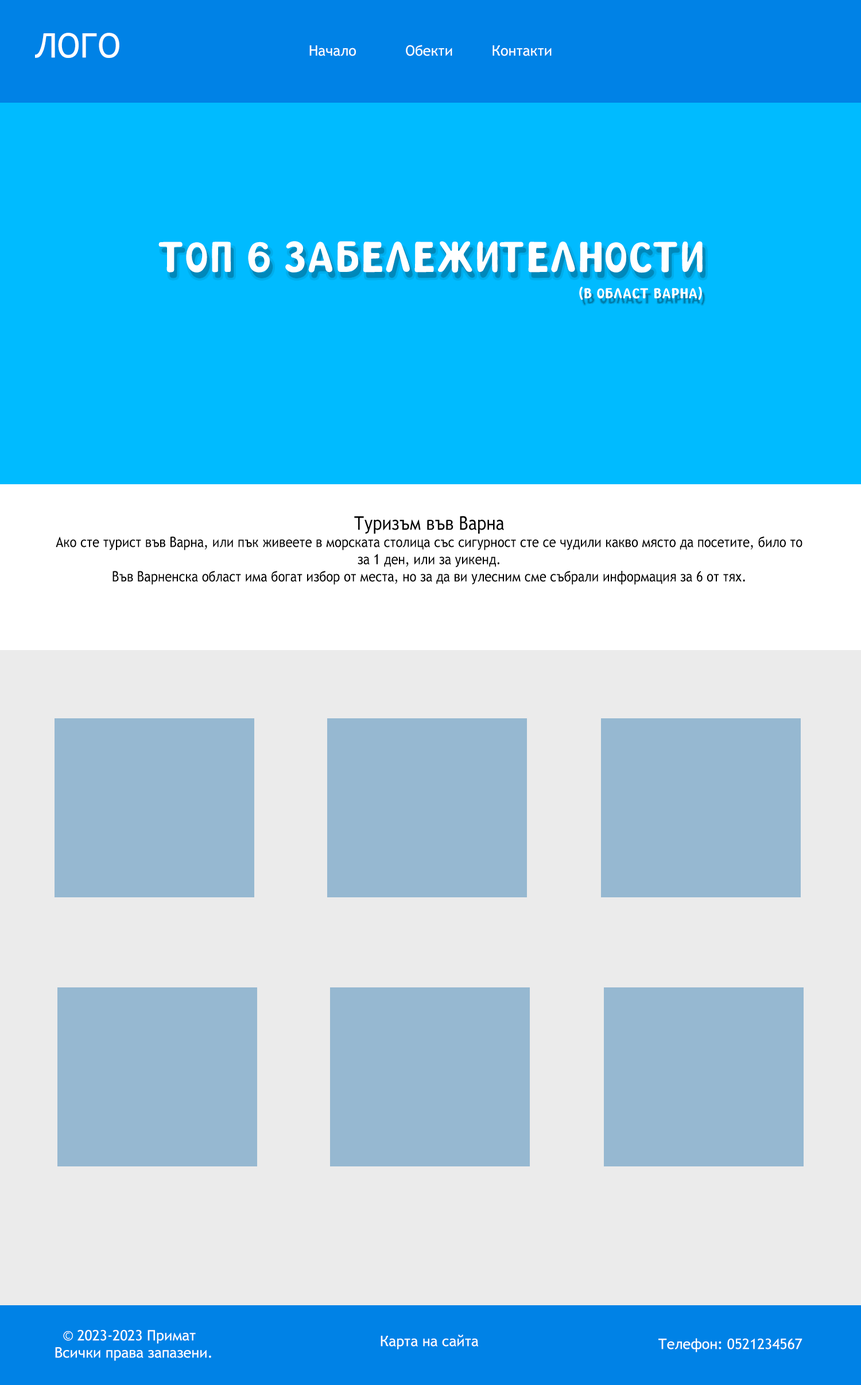
<style>
.page{position:relative;width:861px;height:1385px;background:#ebebeb}
.page>*{position:absolute;margin:0}
.t1{font:33.9px "TrebuchetMS";color:#ffffff}
.t2{font:14.3px "TrebuchetMS";color:#ffffff}
.t3{font:57.4px "gooseberrynormal";color:#ffffff}
.t4{font:19.1px "gooseberrynormal";color:#ffffff}
.t5{font:14.3px "TrebuchetMS";color:#000000;scale:0.88 1}
.t6{font:19.1px "TrebuchetMS";color:#000000;scale:0.88 1}
</style>
<div class="page">
<p class="t1" style="left:35px;top:33px;width:84px;height:25px">ЛОГО</p>
<p class="t2" style="left:309px;top:45px;width:242px;height:11px">Начало         Обекти         Контакти</p>
<p class="t3" style="left:158px;top:241px;width:544px;height:32px">ТОП 6 ЗАБЕЛЕЖИТЕЛНОСТИ</p>
<p class="t4" style="left:579px;top:286px;width:123px;height:14px">(В ОБЛАСТ ВАРНА)</p>
<p class="t5" style="left:56px;top:516px;width:746px;height:69px;text-align:center"><span class="t6"><br>Туризъм във Варна<br></span>Ако сте турист във Варна, или пък живеете в морската столица със сигурност сте се чудили какво място да посетите, било то за 1 ден, или за уикенд.<br>Във Варненска област има богат избор от места, но за да ви улесним сме събрали информация за 6 от тях.</p>
<p class="t2" style="left:55px;top:1330px;width:156px;height:31px;text-align:center">© 2023-2023 Примат <br> Всички права запазени.</p>
<p class="t2" style="left:380px;top:1335px;width:98px;height:15px">Карта на сайта</p>
<p class="t2" style="left:658px;top:1338px;width:144px;height:15px">Телефон: 0521234567</p>
</div>
